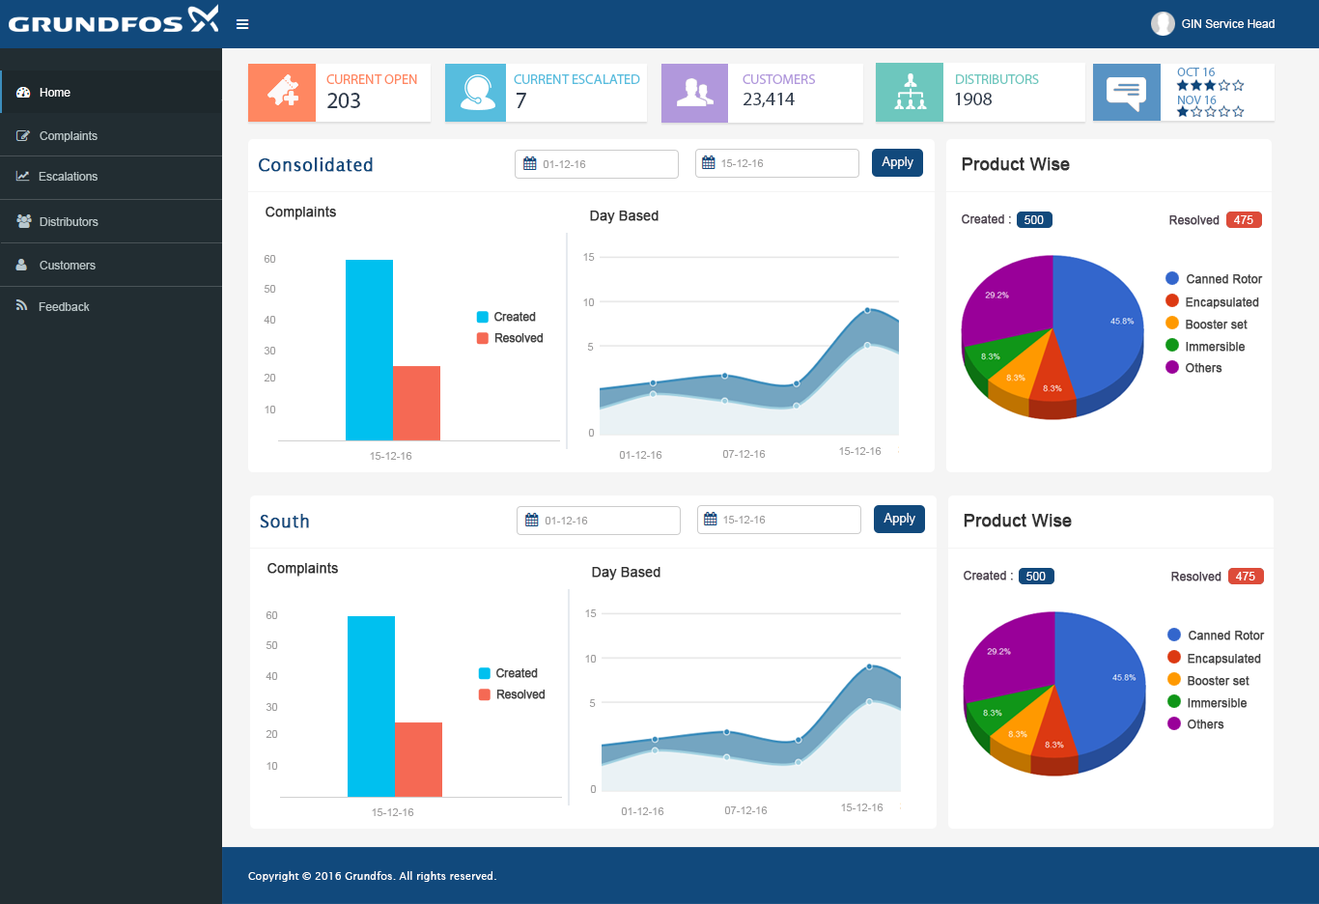
<style>
.page{position:relative;width:1319px;height:904px;background:#ffffff}
.page>*{position:absolute;margin:0}
.t1{font:11.6px "ArialMT";color:#fffefd}
.t2{font:14.1px "MyriadPro-Regular";color:#ff8761;text-transform:uppercase}
.t3{font:34.8px "MyriadPro-Regular";color:#2f3b4c}
.t4{font:14.1px "MyriadPro-Regular";color:#57bdde;text-transform:uppercase}
.t5{font:14.1px "MyriadPro-Regular";color:#b198dc;text-transform:uppercase}
.t6{font:14.1px "MyriadPro-Regular";color:#6dc7be;text-transform:uppercase}
.t7{font:12.6px "MyriadPro-Regular";color:#5893c4}
.t8{font:11.6px "ArialMT";color:#ffffff}
.t9{font:23.2px "MyriadPro-Regular";color:#2f3b4c}
.t10{font:19.3px "MyriadPro-Regular";color:#2f3b4c}
.t11{font:11.6px "ArialMT";color:#b8c4c6}
.t12{font:17.4px "LucidaSans";color:#11497c;font-weight:bold}
.t13{font:10.6px "ArialMT";color:#9e9d9d}
.t14{font:12.6px "ArialMT";color:#f6f8fa}
.t15{font:17.4px "ArialMT";color:#333333;font-weight:bold}
.t16{font:13.5px "ArialMT";color:#333333;font-weight:bold}
.t17{font:11.6px "ArialMT";color:#4e4450;font-weight:bold}
.t18{font:11.6px "ArialMT";color:#f9fafb}
.t19{font:11.6px "ArialMT";color:#444444;font-weight:bold}
.t20{font:11.1px "ArialMT";color:#444444;font-weight:bold}
.t21{font:10.6px "LucidaSans";color:#fdffff}
</style>
<div class="page">
<p class="t1" style="left:1182px;top:19px;width:93px;height:9px">GIN Service Head</p>
<p class="t2" style="left:326px;top:74px;width:91px;height:10px">Current Open <br><span class="t3">215</span></p>
<p class="t4" style="left:514px;top:74px;width:126px;height:10px">Current Escalated</p>
<p class="t5" style="left:743px;top:74px;width:72px;height:10px">Customers</p>
<p class="t6" style="left:956px;top:74px;width:83px;height:10px">Distributors</p>
<p class="t7" style="left:1177px;top:68px;width:38px;height:8px">OCT 16</p>
<p class="t8" style="left:40px;top:88px;width:30px;height:9px">Home</p>
<p class="t9" style="left:327px;top:93px;width:33px;height:15px">203</p>
<p class="t9" style="left:516px;top:93px;width:10px;height:15px">7</p>
<p class="t10" style="left:744px;top:93px;width:51px;height:14px"><span class="t5"><br></span>23,414</p>
<p class="t10" style="left:955px;top:93px;width:37px;height:12px">1908</p>
<p class="t7" style="left:1178px;top:96px;width:39px;height:8px">NOV 16</p>
<p class="t11" style="left:40px;top:131px;width:58px;height:11px">Complaints</p>
<p class="t12" style="left:259px;top:157px;width:114px;height:15px">Consolidated</p>
<p class="t13" style="left:543px;top:160px;width:43px;height:8px">01-12-16</p>
<p class="t13" style="left:721px;top:159px;width:43px;height:8px">15-12-16</p>
<p class="t14" style="left:882px;top:156px;width:32px;height:13px">Apply</p>
<p class="t15" style="left:962px;top:157px;width:108px;height:14px">Product Wise</p>
<p class="t11" style="left:39px;top:172px;width:59px;height:9px">Escalations</p>
<p class="t16" style="left:266px;top:206px;width:70px;height:14px">Complaints</p>
<p class="t11" style="left:40px;top:217px;width:59px;height:9px">Distributors</p>
<p class="t16" style="left:590px;top:211px;width:69px;height:13px">Day Based</p>
<p class="t17" style="left:962px;top:214px;width:49px;height:10px">Created :</p>
<p class="t18" style="left:1025px;top:215px;width:19px;height:9px"><span class="t19"><br><br> </span>500</p>
<p class="t17" style="left:1169px;top:215px;width:51px;height:10px">Resolved</p>
<p class="t8" style="left:1234px;top:215px;width:20px;height:9px">475</p>
<p class="t13" style="left:264px;top:255px;width:12px;height:8px">60</p>
<p class="t13" style="left:583px;top:253px;width:12px;height:8px">15</p>
<p class="t11" style="left:40px;top:261px;width:56px;height:8px">Customers</p>
<p class="t19" style="left:1187px;top:274px;width:76px;height:10px">Canned Rotor</p>
<p class="t13" style="left:264px;top:285px;width:12px;height:8px">50</p>
<p class="t11" style="left:39px;top:302px;width:51px;height:9px">Feedback</p>
<p class="t13" style="left:583px;top:298px;width:12px;height:8px">10</p>
<p class="t19" style="left:1186px;top:297px;width:73px;height:12px">Encapsulated</p>
<p class="t13" style="left:264px;top:316px;width:12px;height:8px">40</p>
<p class="t20" style="left:494px;top:312px;width:42px;height:10px">Created</p>
<p class="t19" style="left:1186px;top:320px;width:62px;height:9px">Booster set</p>
<p class="t20" style="left:494px;top:333px;width:50px;height:10px">Resolved</p>
<p class="t19" style="left:1186px;top:342px;width:60px;height:10px">Immersible</p>
<p class="t13" style="left:264px;top:347px;width:12px;height:7px">30</p>
<p class="t13" style="left:587px;top:343px;width:7px;height:8px">5</p>
<p class="t19" style="left:1186px;top:363px;width:37px;height:10px">Others</p>
<p class="t13" style="left:264px;top:374px;width:12px;height:7px">20</p>
<p class="t13" style="left:265px;top:406px;width:11px;height:7px">10</p>
<p class="t13" style="left:588px;top:429px;width:7px;height:8px">0</p>
<p class="t13" style="left:839px;top:447px;width:43px;height:8px">15-12-16</p>
<p class="t13" style="left:370px;top:452px;width:42px;height:8px">15-12-16</p>
<p class="t13" style="left:619px;top:451px;width:43px;height:8px">01-12-16</p>
<p class="t13" style="left:722px;top:450px;width:44px;height:8px">07-12-16</p>
<p class="t12" style="left:260px;top:514px;width:49px;height:14px">South</p>
<p class="t13" style="left:545px;top:517px;width:43px;height:7px">01-12-16</p>
<p class="t13" style="left:723px;top:516px;width:43px;height:7px">15-12-16</p>
<p class="t14" style="left:884px;top:513px;width:32px;height:12px">Apply</p>
<p class="t15" style="left:964px;top:514px;width:108px;height:13px">Product Wise</p>
<p class="t16" style="left:268px;top:562px;width:70px;height:15px">Complaints</p>
<p class="t16" style="left:592px;top:567px;width:69px;height:13px">Day Based</p>
<p class="t17" style="left:964px;top:571px;width:49px;height:9px">Created :</p>
<p class="t18" style="left:1027px;top:572px;width:19px;height:8px"><span class="t19"><br><br> </span>500</p>
<p class="t17" style="left:1171px;top:572px;width:51px;height:9px">Resolved</p>
<p class="t8" style="left:1236px;top:572px;width:19px;height:8px">475</p>
<p class="t13" style="left:266px;top:611px;width:12px;height:8px">60</p>
<p class="t13" style="left:585px;top:609px;width:12px;height:8px">15</p>
<p class="t13" style="left:266px;top:641px;width:12px;height:8px">50</p>
<p class="t19" style="left:1189px;top:631px;width:76px;height:9px">Canned Rotor</p>
<p class="t19" style="left:1188px;top:654px;width:73px;height:11px">Encapsulated</p>
<p class="t13" style="left:585px;top:655px;width:12px;height:7px">10</p>
<p class="t13" style="left:266px;top:672px;width:12px;height:8px">40</p>
<p class="t20" style="left:496px;top:668px;width:42px;height:10px">Created</p>
<p class="t19" style="left:1188px;top:676px;width:62px;height:10px">Booster set</p>
<p class="t20" style="left:496px;top:690px;width:50px;height:9px">Resolved</p>
<p class="t13" style="left:589px;top:699px;width:7px;height:8px">5</p>
<p class="t19" style="left:1188px;top:698px;width:60px;height:10px">Immersible</p>
<p class="t13" style="left:266px;top:703px;width:12px;height:8px">30</p>
<p class="t19" style="left:1188px;top:719px;width:37px;height:10px">Others</p>
<p class="t13" style="left:266px;top:730px;width:12px;height:8px">20</p>
<p class="t13" style="left:267px;top:762px;width:11px;height:8px">10</p>
<p class="t13" style="left:590px;top:785px;width:7px;height:8px">0</p>
<p class="t13" style="left:372px;top:808px;width:42px;height:8px">15-12-16</p>
<p class="t13" style="left:621px;top:807px;width:43px;height:8px">01-12-16</p>
<p class="t13" style="left:724px;top:806px;width:44px;height:8px">07-12-16</p>
<p class="t13" style="left:841px;top:803px;width:43px;height:8px">15-12-16</p>
<p class="t21" style="left:248px;top:871px;width:248px;height:11px">Copyright © 2016 Grundfos. All rights reserved.</p>
</div>
